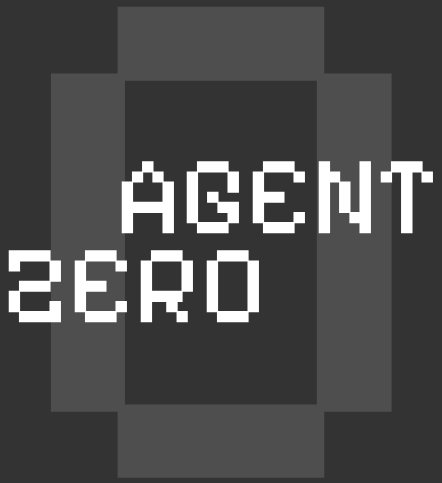
<style>
.page{position:relative;width:442px;height:483px;background:#333333}
.page>*{position:absolute;margin:0}
.t1{font:112.3px "PixelifySans-Regular";color:#ffffff}
</style>
<div class="page">
<p class="t1" style="left:121px;top:161px;width:312px;height:73px">AGENT</p>
<p class="t1" style="left:8px;top:250px;width:251px;height:73px">ZERO</p>
</div>
